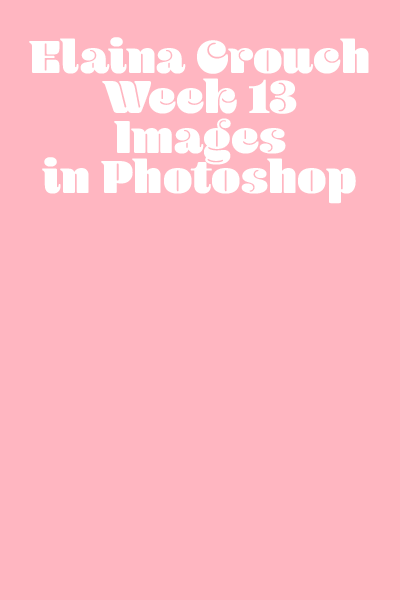
<style>
.page{position:relative;width:400px;height:600px;background:#ffb6c1}
.page>*{position:absolute;margin:0}
.t1{font:48px/40px "Blenny-Black";color:#ffffff}
</style>
<div class="page">
<p class="t1" style="left:29px;top:37px;width:340px;height:167px;text-align:center">Elaina Crouch<br>Week 13 <br>Images<br>in Photoshop</p>
</div>
